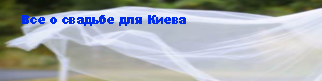
<style>
.page{position:relative;width:322px;height:81px}
.page>*{position:absolute;margin:0}
.t1{font:11.9px "Arial-Black";color:#002ceb}
</style>
<div class="page">
<p class="t1" style="left:22px;top:15px;width:164px;height:11px">Все о свадьбе для Киева</p>
</div>
